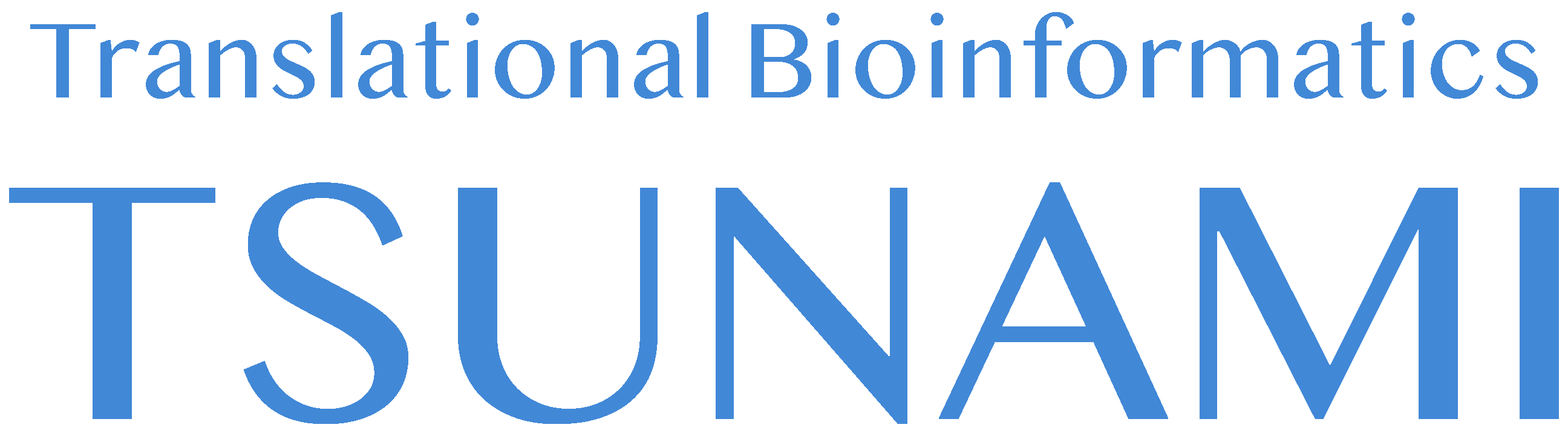
<style>
.page{position:relative;width:1568px;height:436px;background:#ffffff}
.page>*{position:absolute;margin:0}
.t1{font:113.1px "MalayalamMN";color:#4188d7}
.t2{font:355.4px "MalayalamMN";color:#4188d7}
</style>
<div class="page">
<p class="t1" style="left:30px;top:12px;width:1508px;height:87px">Translational Bioinformatics</p>
<p class="t2" style="left:9px;top:182px;width:1550px;height:241px">TSUNAMI</p>
</div>
